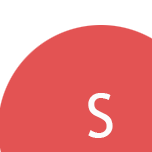
<style>
.page{position:relative;width:152px;height:152px;background:#e35353}
.page>*{position:absolute;margin:0}
.t1{font:60px "TrebuchetMS";letter-spacing:0.08em;color:#fcfcfc;text-transform:uppercase}
</style>
<div class="page">
<p class="t1" style="left:88px;top:93px;width:25px;height:45px">S</p>
</div>
